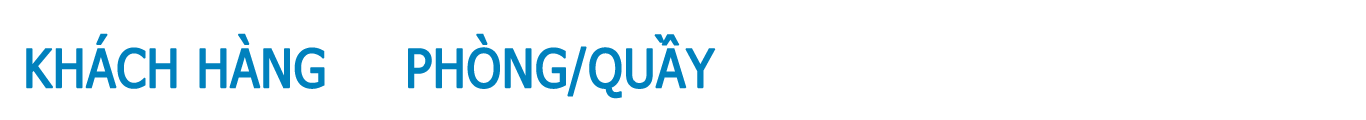
<style>
.page{position:relative;width:1366px;height:120px;background:#ffffff}
.page>*{position:absolute;margin:0}
.t1{font:52.8px "Tahoma";color:#0081bd;font-weight:bold;scale:0.91 1}
</style>
<div class="page">
<p class="t1" style="left:26px;top:33px;width:299px;height:56px">KHÁCH HÀNG</p>
<p class="t1" style="left:408px;top:33px;width:308px;height:66px">PHÒNG/QUẦY</p>
</div>
